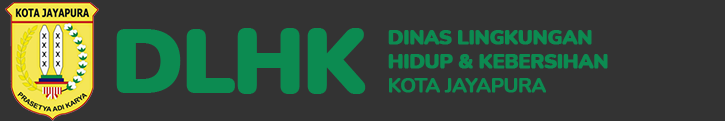
<style>
.page{position:relative;width:725px;height:121px;background:#333333}
.page>*{position:absolute;margin:0}
.t1{font:90px "Nunito-Black";letter-spacing:-0.04em;color:#0c8b51;font-weight:bold}
.t2{font:20px "Nunito-Black";letter-spacing:-0.04em;color:#0c8b51;font-weight:bold}
.t3{font:20px "Nunito-Bold";letter-spacing:-0.04em;color:#0c8b51;font-weight:bold}
</style>
<div class="page">
<p class="t1" style="left:116px;top:28px;width:250px;height:66px">DLHK</p>
<p class="t2" style="left:388px;top:30px;width:220px;height:63px">DINAS LINGKUNGAN <br>HIDUP &amp; KEBERSIHAN<br><span class="t3">KOTA JAYAPURA</span></p>
</div>
